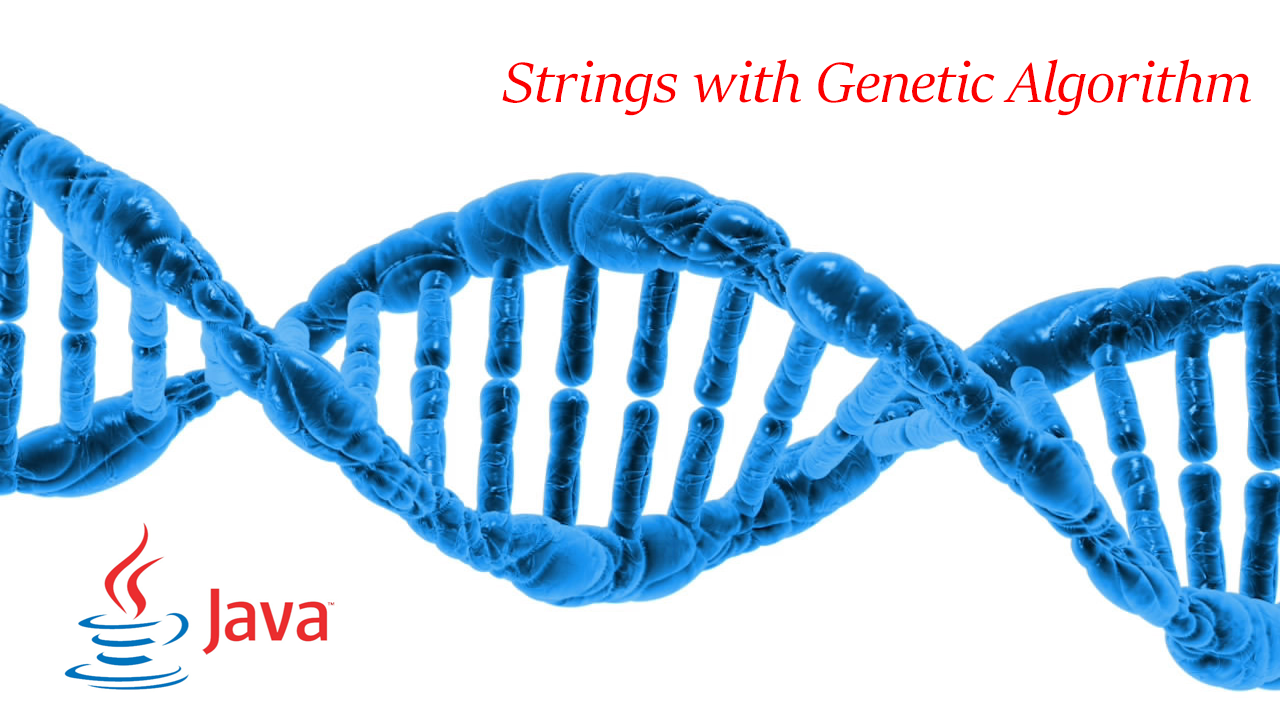
<style>
.page{position:relative;width:1280px;height:720px;background:#ffffff}
.page>*{position:absolute;margin:0}
.t1{font:63.5px "SitkaBanner-Italic";color:#fb0000}
</style>
<div class="page">
<p class="t1" style="left:502px;top:59px;width:749px;height:57px">Strings with Genetic Algorithm</p>
</div>
